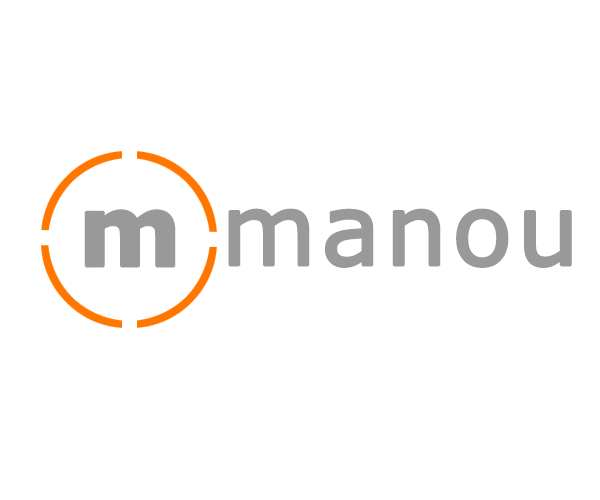
<style>
.page{position:relative;width:600px;height:500px;background:#ffffff}
.page>*{position:absolute;margin:0}
.t1{font:98px "Verdana-Bold";letter-spacing:0.025em;color:#999999;font-weight:bold}
.t2{font:98px "Verdana";letter-spacing:0.025em;color:#999999;font-weight:bold}
</style>
<div class="page">
<p class="t1" style="left:84px;top:209px;width:92px;height:59px">m</p>
<p class="t2" style="left:228px;top:208px;width:344px;height:60px">manou</p>
</div>
